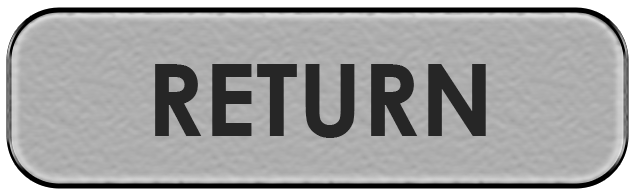
<style>
.page{position:relative;width:636px;height:195px}
.page>*{position:absolute;margin:0}
.t1{font:100px "CenturyGothic-Bold";color:#262626}
</style>
<div class="page">
<p class="t1" style="left:155px;top:64px;width:331px;height:74px">RETURN</p>
</div>
